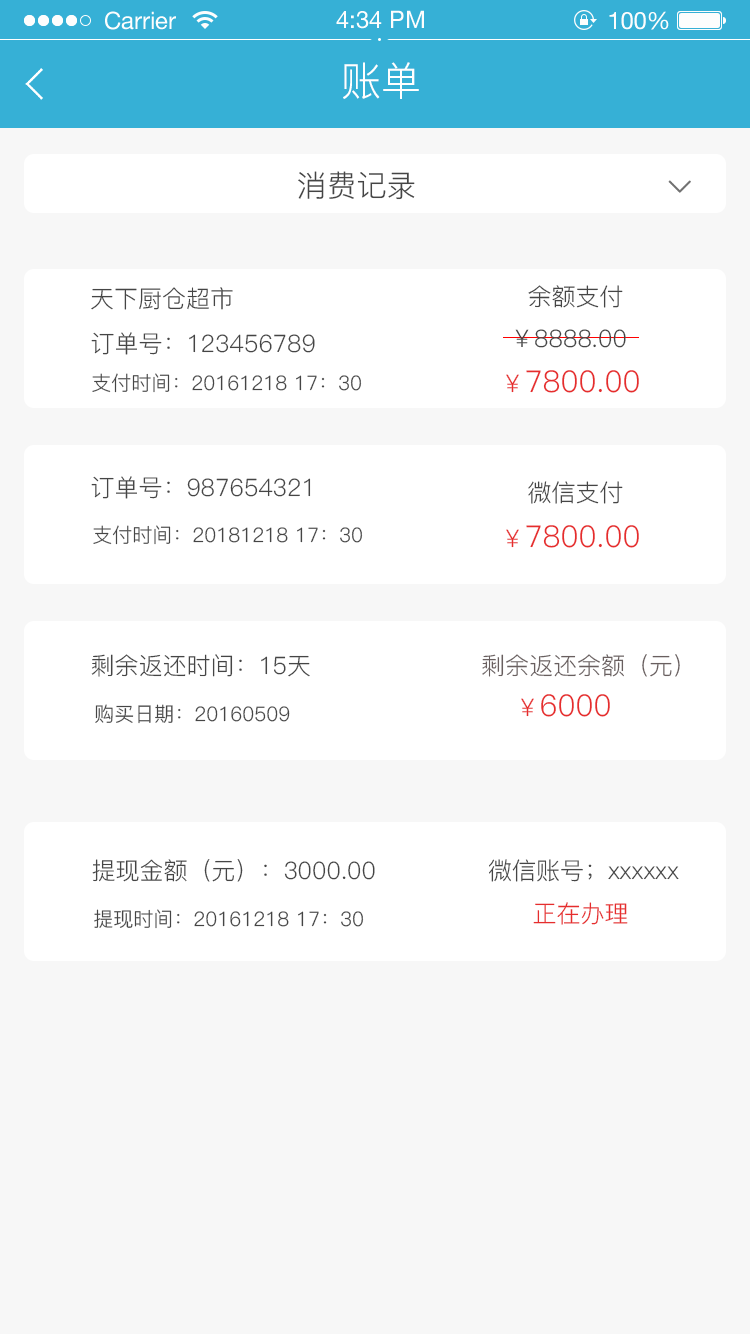
<style>
.page{position:relative;width:750px;height:1334px;background:#f7f7f7}
.page>*{position:absolute;margin:0}
.t1{font:40px "PingFang-SC-Regular";color:#ffffff}
.t2{font:30px "PingFang-SC-Regular";color:#454545}
.t3{font:24px "PingFang-SC-Regular";color:#454545}
.t4{font:20px "PingFang-SC-Regular";color:#454545}
.t5{font:30px "PingFang-SC-Regular";color:#e62d2d}
.t6{font:24px "PingFang-SC-Regular";color:#e62d2d}
.t7{font:24px "PingFang-SC-Regular";color:#695f5f}
</style>
<div class="page">
<p class="t1" style="left:343px;top:62px;width:76px;height:37px">账单</p>
<p class="t2" style="left:298px;top:171px;width:117px;height:29px">消费记录</p>
<p class="t3" style="left:91px;top:287px;width:142px;height:23px">天下厨仓超市</p>
<p class="t3" style="left:528px;top:285px;width:95px;height:23px">余额支付</p>
<p class="t3" style="left:515px;top:329px;width:111px;height:19px">￥8888.00</p>
<p class="t3" style="left:91px;top:332px;width:224px;height:23px">订单号：123456789</p>
<p class="t4" style="left:92px;top:373px;width:270px;height:20px">支付时间：20161218 17：30</p>
<p class="t5" style="left:506px;top:370px;width:133px;height:23px"><span class="t6">￥</span>7800.00</p>
<p class="t3" style="left:91px;top:476px;width:220px;height:23px">订单号：987654321</p>
<p class="t3" style="left:528px;top:481px;width:95px;height:23px">微信支付</p>
<p class="t4" style="left:93px;top:525px;width:270px;height:20px">支付时间：20181218 17：30</p>
<p class="t5" style="left:506px;top:525px;width:133px;height:23px"><span class="t6">￥</span>7800.00</p>
<p class="t3" style="left:91px;top:654px;width:219px;height:23px">剩余返还时间：15天</p>
<p class="t7" style="left:482px;top:654px;width:198px;height:23px">剩余返还余额（元）</p>
<p class="t5" style="left:521px;top:694px;width:89px;height:23px"><span class="t6">￥</span>6000</p>
<p class="t4" style="left:95px;top:704px;width:195px;height:20px">购买日期：20160509</p>
<p class="t3" style="left:92px;top:859px;width:283px;height:23px">提现金额（元）：3000.00</p>
<p class="t3" style="left:489px;top:859px;width:190px;height:23px">微信账号；xxxxxx</p>
<p class="t6" style="left:533px;top:902px;width:95px;height:23px">正在办理</p>
<p class="t4" style="left:94px;top:909px;width:270px;height:20px">提现时间：20161218 17：30</p>
</div>
